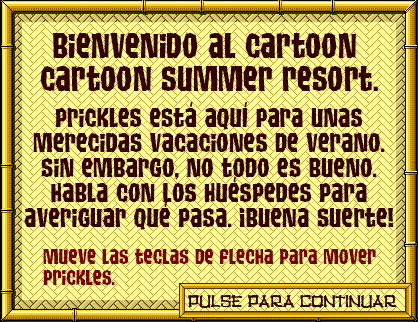
<style>
.page{position:relative;width:418px;height:322px;background:#ffff99}
.page>*{position:absolute;margin:0}
.t1{font:35.2px/32.9px "TikiIsland";color:#330000;scale:1.07 1}
.t2{font:26.5px/24.8px "TikiIsland";color:#330000;scale:1.11 1}
.t3{font:21.5px/20.1px "TikiIsland";color:#770000;scale:1.08 1}
.t4{font:17.5px "TikiHut";color:#330000}
</style>
<div class="page">
<p class="t1" style="left:40px;top:33px;width:338px;height:58px;text-align:center">Bienvenido al cartoon <br>cartoon summer resort.</p>
<p class="t2" style="left:24px;top:102px;width:370px;height:128px;text-align:center">prickles está aquí para unas<br>merecidas vacaciones de verano.<br>Sin embargo, no todo es bueno.<br>Habla con los huéspedes para<br>averiguar qué pasa. ¡Buena suerte!</p>
<p class="t3" style="left:43px;top:249px;width:333px;height:36px">Mueve las teclas de flecha para mover<br>prickles.</p>
<p class="t4" style="left:188px;top:295px;width:209px;height:13px">pulse para continuar</p>
<p class="t4" style="left:188px;top:295px;width:209px;height:13px">pulse para continuar</p>
</div>
